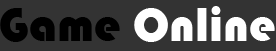
<style>
.page{position:relative;width:276px;height:51px;background:#333333}
.page>*{position:absolute;margin:0}
.t1{font:48.9px "Bauhaus93";color:#ffffff}
.t2{font:48.9px "Bauhaus93";color:#000000}
</style>
<div class="page">
<p class="t1" style="left:0px;top:6px;width:275px;height:36px"><span class="t2">Game </span>Online</p>
</div>
